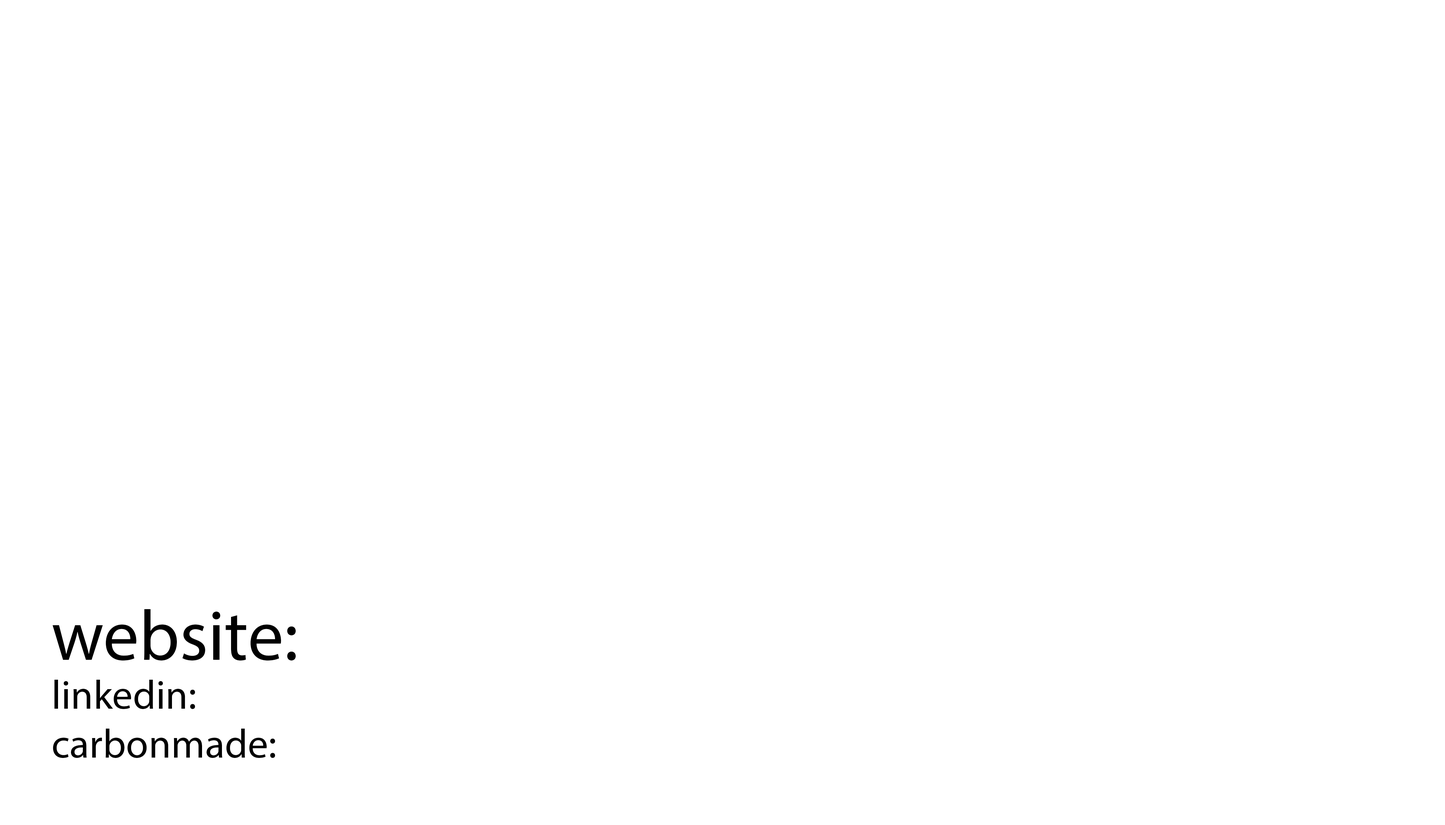
<style>
.page{position:relative;width:1445px;height:825px;background:#ffffff}
.page>*{position:absolute;margin:0}
.t1{font:40.8px "MyriadPro-Regular";color:#000000}
.t2{font:71.3px "MyriadPro-Regular";color:#000000}
</style>
<div class="page">
<p class="t1" style="left:52px;top:609px;width:244px;height:150px"><span class="t2">website:<br></span>linkedin:<br>carbonmade:</p>
</div>
